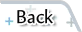
<style>
.page{position:relative;width:82px;height:32px;background:#ffffff}
.page>*{position:absolute;margin:0}
.t1{font:18.7px "Amira-Roman";color:#000000}
</style>
<div class="page">
<p class="t1" style="left:17px;top:9px;width:36px;height:15px;opacity:0.96">Back</p>
</div>
